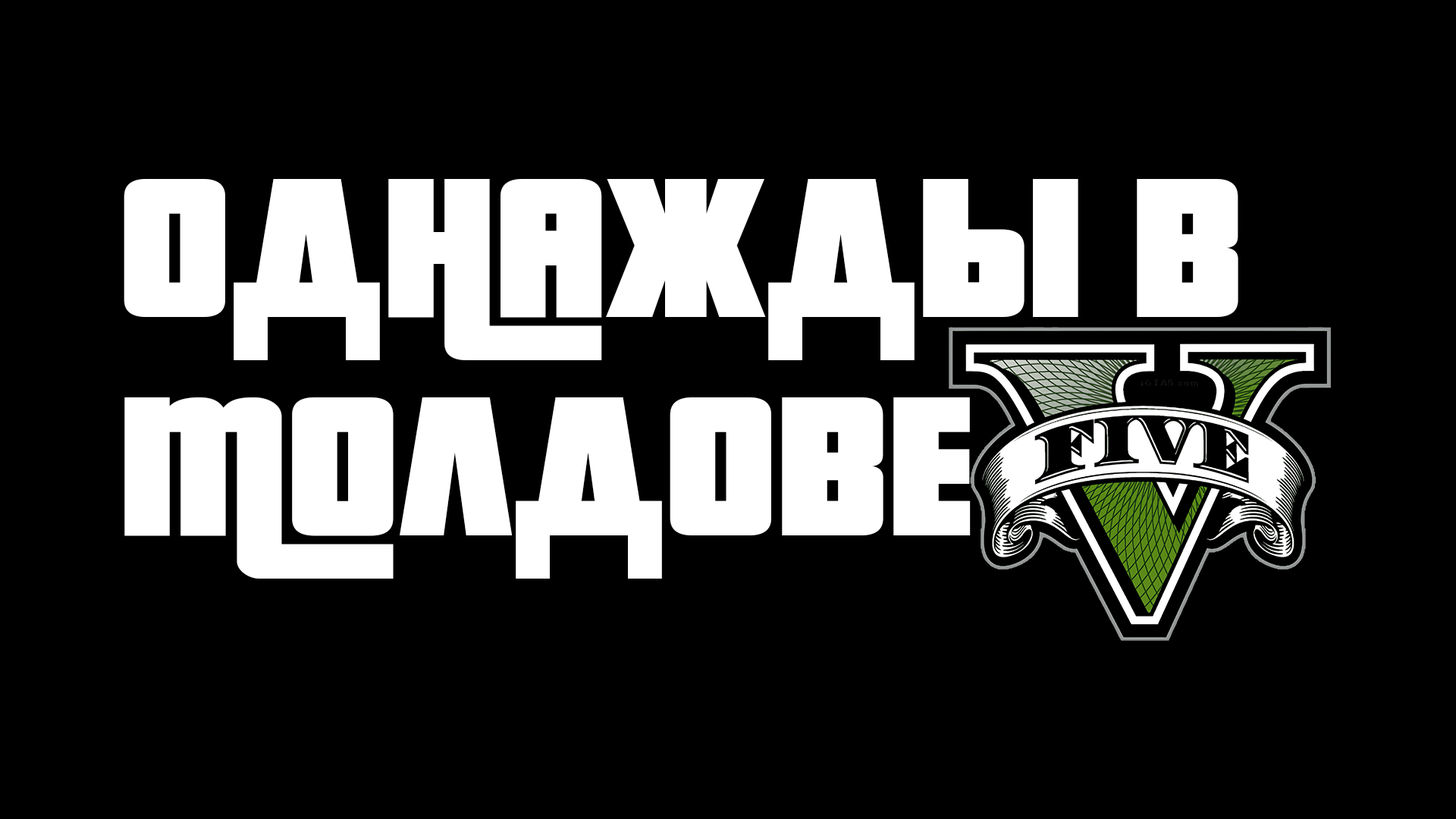
<style>
.page{position:relative;width:1456px;height:819px;background:#000000}
.page>*{position:absolute;margin:0}
.t1{font:216.1px/219px "PricedownBl-Regular";color:#ffffff}
</style>
<div class="page">
<p class="t1" style="left:124px;top:179px;width:1114px;height:400px">ОДНАЖДЫ В<br>МОЛДОВЕ</p>
</div>
